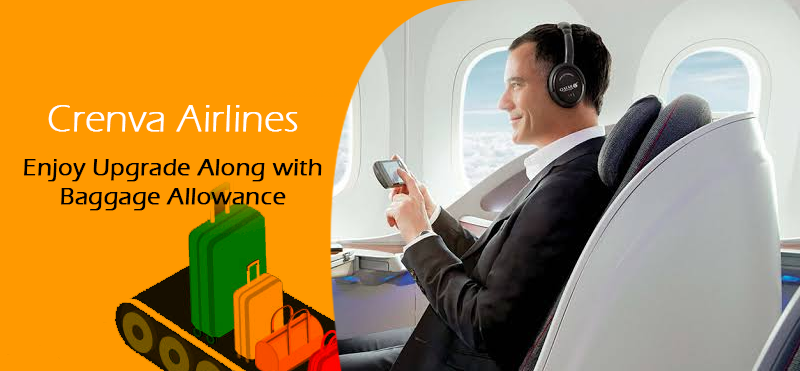
<style>
.page{position:relative;width:800px;height:371px;background:#ff9900}
.page>*{position:absolute;margin:0}
.t1{font:38.8px "ErasITC-Light";color:#ffffff;font-weight:bold}
.t2{font:24px "ErasITC-Medium";color:#000000;font-weight:bold}
</style>
<div class="page">
<p class="t1" style="left:48px;top:105px;width:250px;height:27px">Crenva Airlines</p>
<p class="t2" style="left:24px;top:159px;width:298px;height:52px;text-align:center">Enjoy Upgrade Along with <br>Baggage Allowance</p>
</div>
